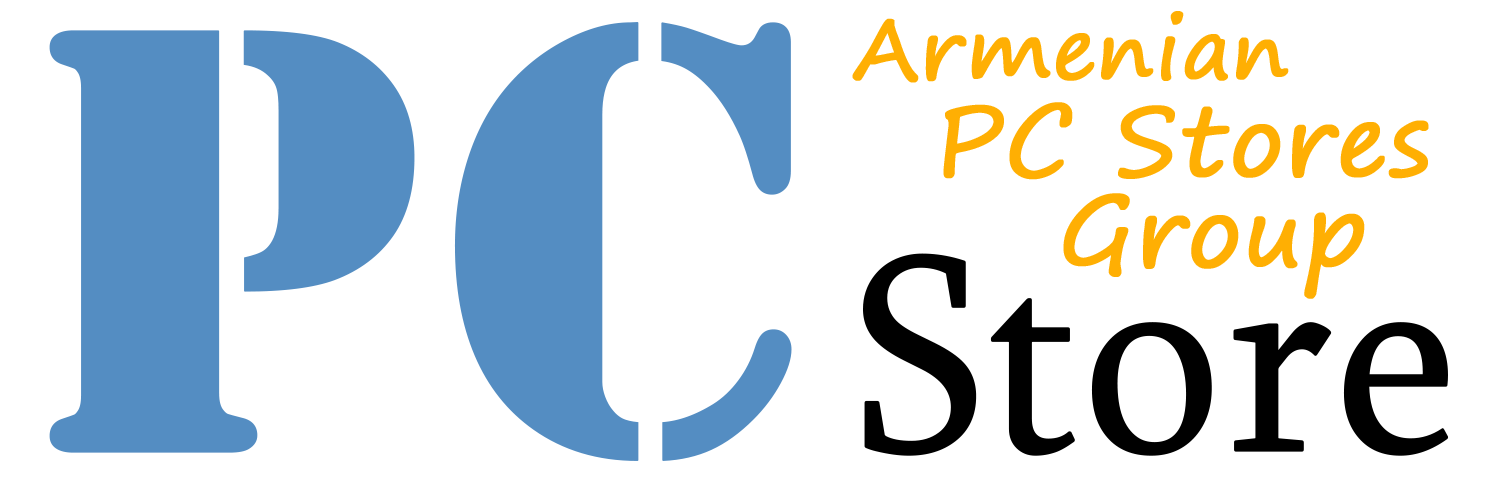
<style>
.page{position:relative;width:1500px;height:477px;background:#ffffff}
.page>*{position:absolute;margin:0}
.t1{font:82.8px "SegoePrint";color:#ffaf03;font-weight:bold}
.t2{font:631.4px "Stencil";color:#548dc2;font-weight:bold}
.t3{font:95.9px "SegoePrint";color:#ffaf03;font-weight:bold}
.t4{font:285.5px "Sylfaen";color:#000000;font-weight:bold;scale:0.93 1}
</style>
<div class="page">
<p class="t1" style="left:852px;top:11px;width:437px;height:72px">Armenian</p>
<p class="t2" style="left:49px;top:22px;width:743px;height:439px">PC</p>
<p class="t3" style="left:943px;top:102px;width:486px;height:78px">PC Stores</p>
<p class="t3" style="left:1063px;top:193px;width:302px;height:106px">Group</p>
<p class="t4" style="left:863px;top:253px;width:586px;height:203px">Store</p>
</div>
